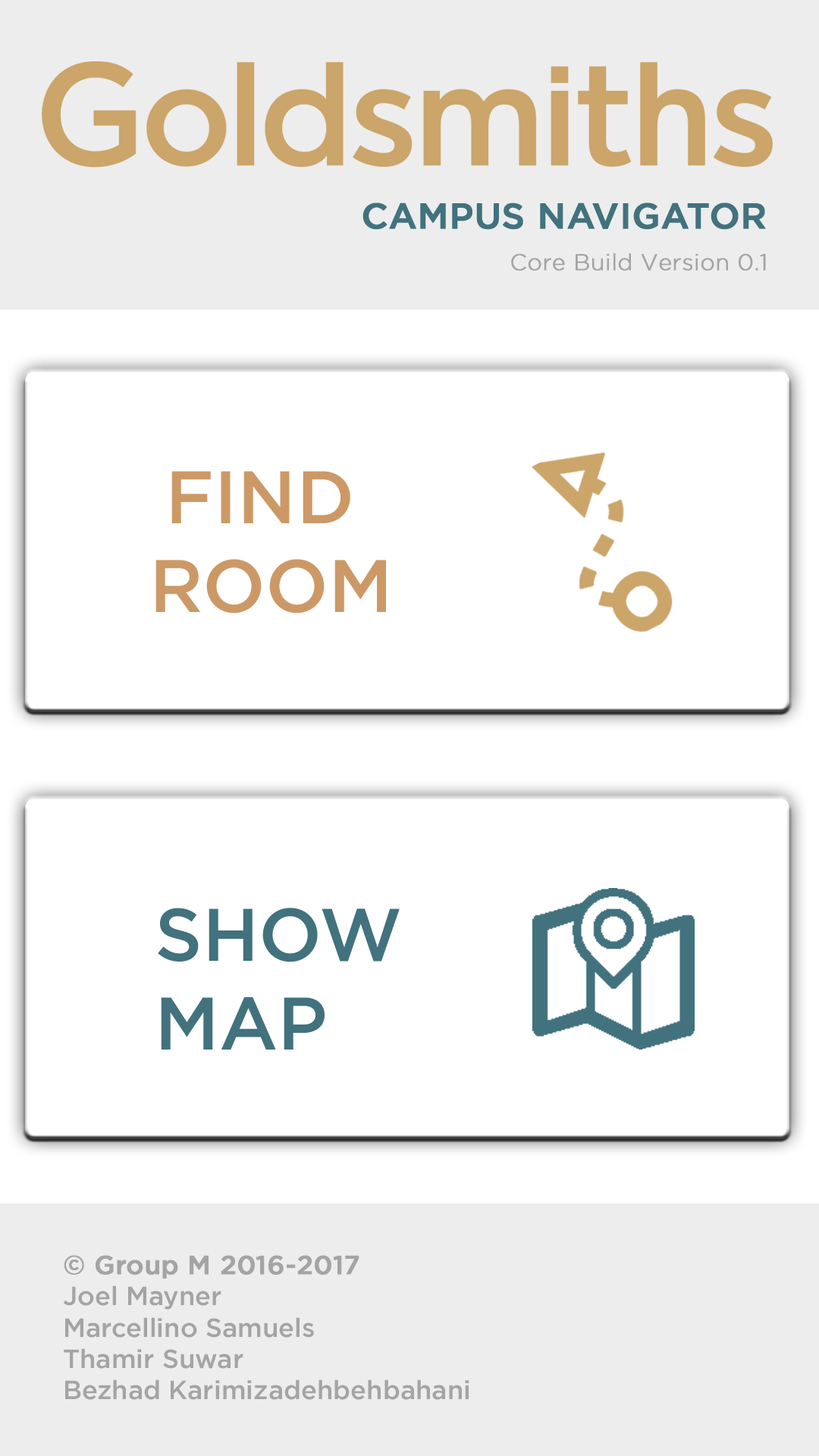
<style>
.page{position:relative;width:819px;height:1456px;background:#ffffff}
.page>*{position:absolute;margin:0}
.t1{font:35.6px "Gotham-Medium";color:#41727e;font-weight:bold}
.t2{font:22.7px "Gotham-Light";color:#a4a4a4;font-weight:bold}
.t3{font:74.1px "Gotham-Medium";color:#cc9966}
.t4{font:74.4px "Gotham-Medium";color:#41727e}
.t5{font:26.2px "Gotham-Medium";color:#a4a4a4}
.t6{font:26.2px "Gotham-Medium";color:#a4a4a4;font-weight:bold}
</style>
<div class="page">
<p class="t1" style="left:362px;top:202px;width:404px;height:28px">CAMPUS NAVIGATOR</p>
<p class="t2" style="left:511px;top:253px;width:255px;height:18px">Core Build Version 0.1</p>
<p class="t3" style="left:155px;top:471px;width:231px;height:142px;text-align:center">FIND <br>ROOM</p>
<p class="t4" style="left:158px;top:908px;width:242px;height:142px">SHOW<br>MAP</p>
<p class="t5" style="left:63px;top:1255px;width:406px;height:145px"><span class="t6">© Group M 2016-2017<br></span>Joel Mayner<br>Marcellino Samuels<br>Thamir Suwar<br>Bezhad Karimizadehbehbahani</p>
</div>
